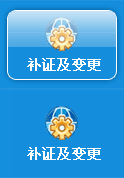
<style>
.page{position:relative;width:124px;height:178px;background:#138ddc}
.page>*{position:absolute;margin:0}
.t1{font:14px "SimSun";color:#ffffff;font-weight:bold}
</style>
<div class="page">
<p class="t1" style="left:27px;top:58px;width:74px;height:13px">补证及变更</p>
<p class="t1" style="left:27px;top:147px;width:74px;height:13px">补证及变更</p>
</div>
